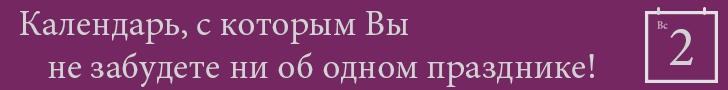
<style>
.page{position:relative;width:728px;height:90px;background:#752761}
.page>*{position:absolute;margin:0}
.t1{font:36px "MinionPro-Regular";color:#d2d2d4}
.t2{font:55.4px "MinionPro-Regular";color:#d2d2d4}
</style>
<div class="page">
<p class="t1" style="left:20px;top:11px;width:574px;height:76px;text-align:center">Календарь, с которым Вы <br>      не забудете ни об одном празднике!</p>
<p class="t2" style="left:670px;top:29px;width:23px;height:36px">2</p>
</div>
